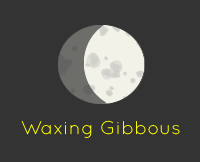
<style>
.page{position:relative;width:200px;height:162px;background:#333333}
.page>*{position:absolute;margin:0}
.t1{font:18.9px "Quicksand-Regular";color:#fffc00;scale:1.04 1}
</style>
<div class="page">
<p class="t1" style="left:21px;top:120px;width:159px;height:18px">Waxing Gibbous</p>
</div>
